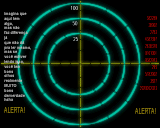
<style>
.page{position:relative;width:160px;height:128px;background:#000000}
.page>*{position:absolute;margin:0}
.t1{font:4px "Arial-BoldMT";scale:0.96 1}
.t2{font:8px "ArialMT";scale:0.64 1}
</style>
<div class="page">
<p class="t1" style="left:4px;top:12px;width:27px;height:89px">imagina que<br> aqui tem <br> algo,<br> mas não<br> faz diferença<br> já <br> que não dá <br> pra ler mesmo, <br> mas se <br> você estiver <br> lendo isso, <br> você tem <br> bons <br> olhos<br> realmente<br> MUITO<br> bons<br> derverdade<br> haha</p>
<p class="t2" style="left:4px;top:107px;width:21px;height:6px">ALERTA!</p>
<p class="t2" style="left:135px;top:108px;width:21px;height:6px">ALERTA!</p>
</div>
